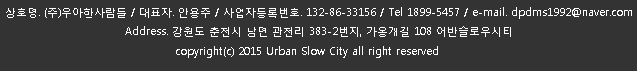
<style>
.page{position:relative;width:637px;height:71px;background:#333333}
.page>*{position:absolute;margin:0}
.t1{font:11px "MalgunGothicRegular";color:#ffffff}
</style>
<div class="page">
<p class="t1" style="left:6px;top:7px;width:626px;height:30px;text-align:center">상호명. (주)우아한사람들 / 대표자. 안용주 / 사업자등록번호. 132-86-33156 / Tel 1899-5457 / e-mail. dpdms1992@naver.com<br>Address. 강원도 춘천시 남면 관천리 383-2번지, 가옹개길 108 어반슬로우시티</p>
<p class="t1" style="left:176px;top:46px;width:262px;height:12px">copyright(c) 2015 Urban Slow City all right reserved</p>
</div>
